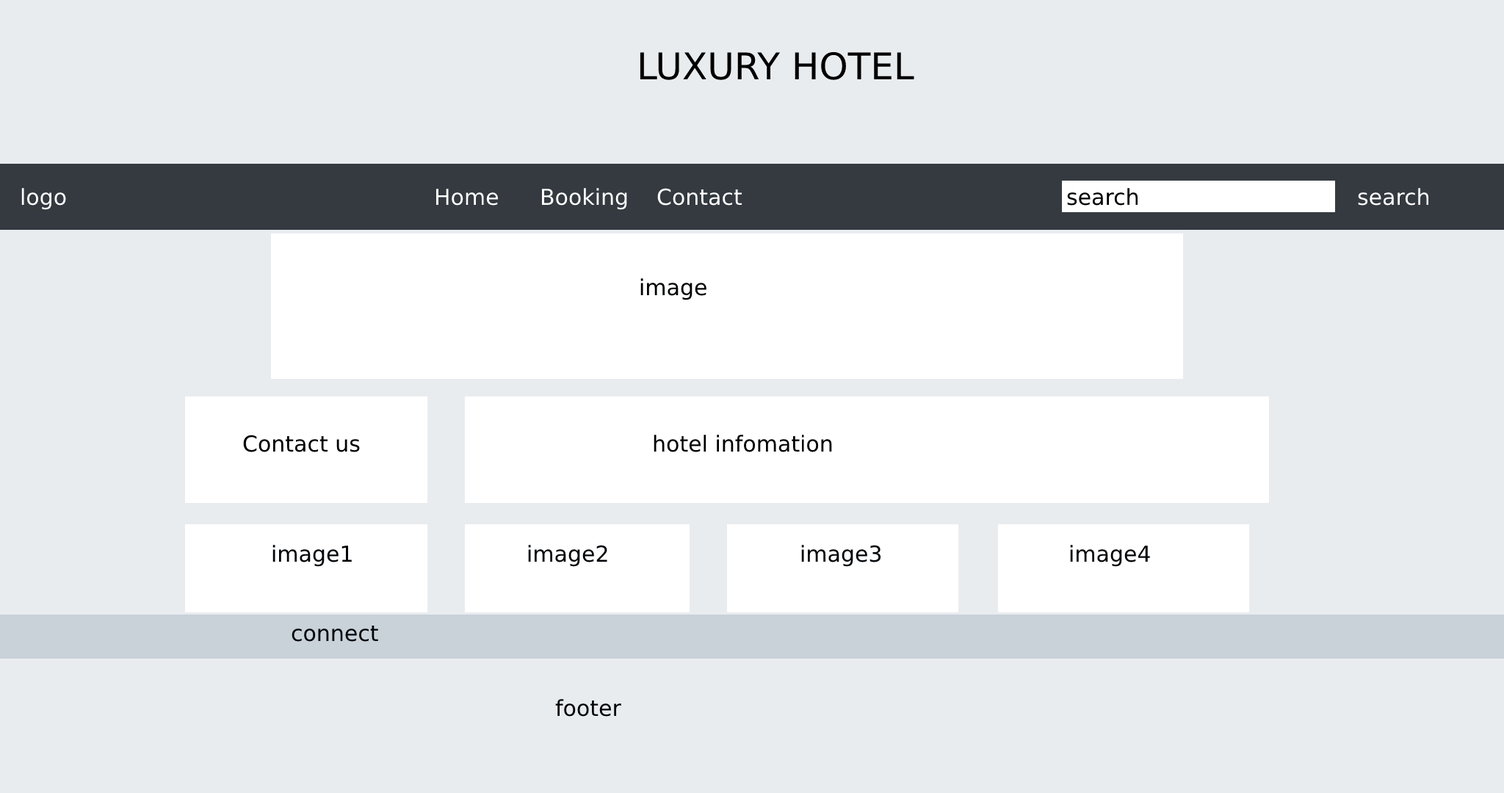
<style>
.page{position:relative;width:1504px;height:793px;background:#e9ecef}
.page>*{position:absolute;margin:0}
.t1{font:36.7px "DejaVuSans";color:#000000}
.t2{font:22px "DejaVuSans";color:#ffffff}
.t3{font:22px "DejaVuSans";color:#000203}
.t4{font:22px "DejaVuSans";color:#020508}
</style>
<div class="page">
<p class="t1" style="left:640px;top:51px;width:274px;height:29px">LUXURY HOTEL</p>
<p class="t2" style="left:21px;top:188px;width:45px;height:22px">logo</p>
<p class="t2" style="left:435px;top:189px;width:63px;height:17px">Home</p>
<p class="t2" style="left:541px;top:188px;width:86px;height:22px">Booking</p>
<p class="t2" style="left:657px;top:188px;width:85px;height:18px">Contact</p>
<p class="t3" style="left:1067px;top:188px;width:71px;height:18px">search</p>
<p class="t2" style="left:1358px;top:188px;width:71px;height:18px">search</p>
<p class="t3" style="left:640px;top:278px;width:66px;height:22px">image</p>
<p class="t3" style="left:243px;top:435px;width:117px;height:17px">Contact us</p>
<p class="t3" style="left:653px;top:435px;width:179px;height:17px">hotel infomation</p>
<p class="t4" style="left:272px;top:545px;width:80px;height:22px">image1</p>
<p class="t4" style="left:528px;top:545px;width:79px;height:22px">image2</p>
<p class="t4" style="left:801px;top:545px;width:80px;height:22px">image3</p>
<p class="t4" style="left:1070px;top:545px;width:80px;height:22px">image4</p>
<p class="t4" style="left:291px;top:625px;width:87px;height:17px">connect</p>
<p class="t4" style="left:555px;top:699px;width:66px;height:18px">footer</p>
</div>
